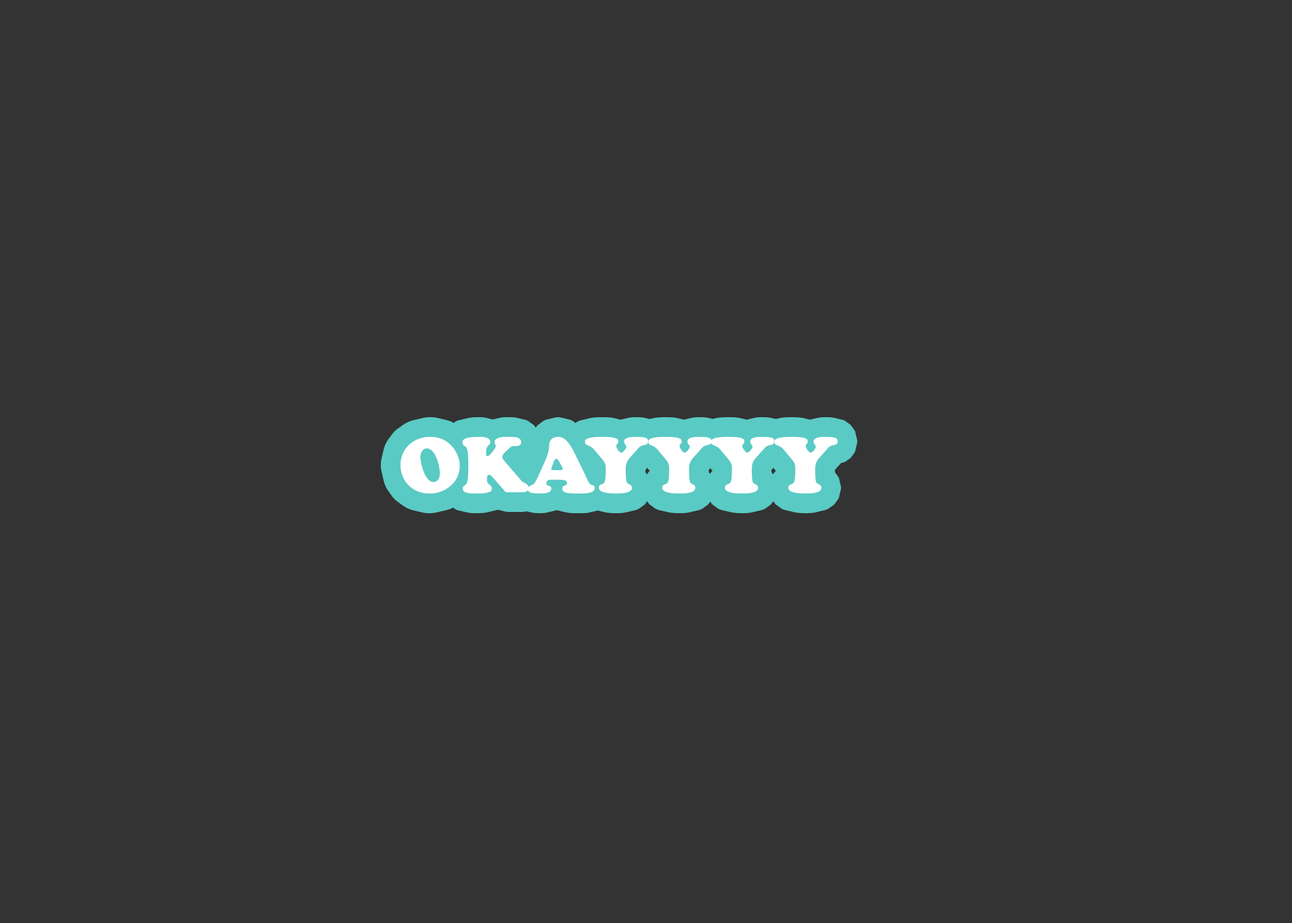
<style>
.page{position:relative;width:1292px;height:923px;background:#333333}
.page>*{position:absolute;margin:0}
.t1{font:76.9px "CooperBlackStd";color:#ffffff}
</style>
<div class="page">
<p class="t1" style="left:401px;top:436px;width:437px;height:58px">OKAYYYY</p>
</div>
